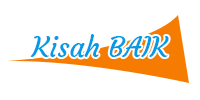
<style>
.page{position:relative;width:200px;height:100px;background:#ffffff}
.page>*{position:absolute;margin:0}
.t1{font:28px "Courgette-Regular";color:#039be5}
</style>
<div class="page">
<p class="t1" style="left:30px;top:34px;width:139px;height:24px">Kisah BAIK</p>
</div>
